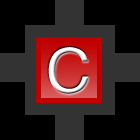
<style>
.page{position:relative;width:140px;height:140px;background:#000000}
.page>*{position:absolute;margin:0}
.t1{font:62.5px "FZHTK--GBK1-0";color:#ffffff}
</style>
<div class="page">
<p class="t1" style="left:48px;top:47px;width:41px;height:47px">C</p>
</div>
